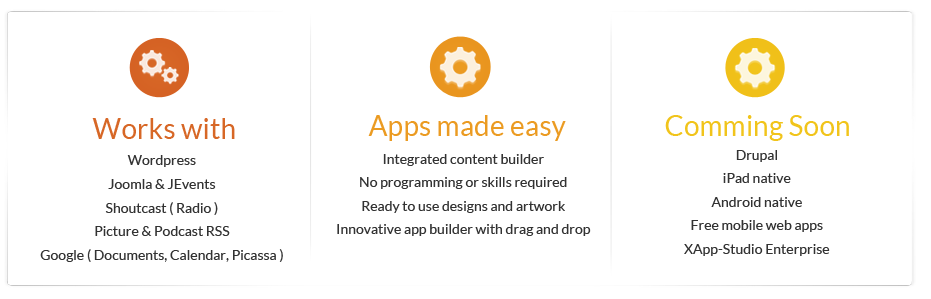
<style>
.page{position:relative;width:931px;height:299px;background:#ffffff}
.page>*{position:absolute;margin:0}
.t1{font:28.3px "Lato-Regular";color:#d76726}
.t2{font:28.3px "Lato-Regular";color:#eb9b22}
.t3{font:28.3px "Lato-Regular";color:#f1c41b}
.t4{font:14px/23.5px "Lato-Regular";color:#333333}
</style>
<div class="page">
<p class="t1" style="left:92px;top:118px;width:143px;height:21px">Works with</p>
<p class="t2" style="left:368px;top:115px;width:198px;height:26px">Apps made easy</p>
<p class="t3" style="left:665px;top:115px;width:184px;height:26px">Comming Soon</p>
<p class="t4" style="left:684px;top:150px;width:146px;height:106px;text-align:center">Drupal<br>iPad native<br>Android native<br>Free mobile web apps<br>XApp-Studio Enterprise</p>
<p class="t4" style="left:40px;top:155px;width:243px;height:107px;text-align:center">Wordpress<br>Joomla &amp; JEvents<br>Shoutcast ( Radio )<br>Picture &amp; Podcast RSS<br>Google ( Documents, Calendar, Picassa )</p>
<p class="t4" style="left:337px;top:154px;width:254px;height:82px;text-align:center">Integrated content builder<br>No programming or skills required<br>Ready to use designs and artwork<br>Innovative app builder with drag and drop</p>
</div>
